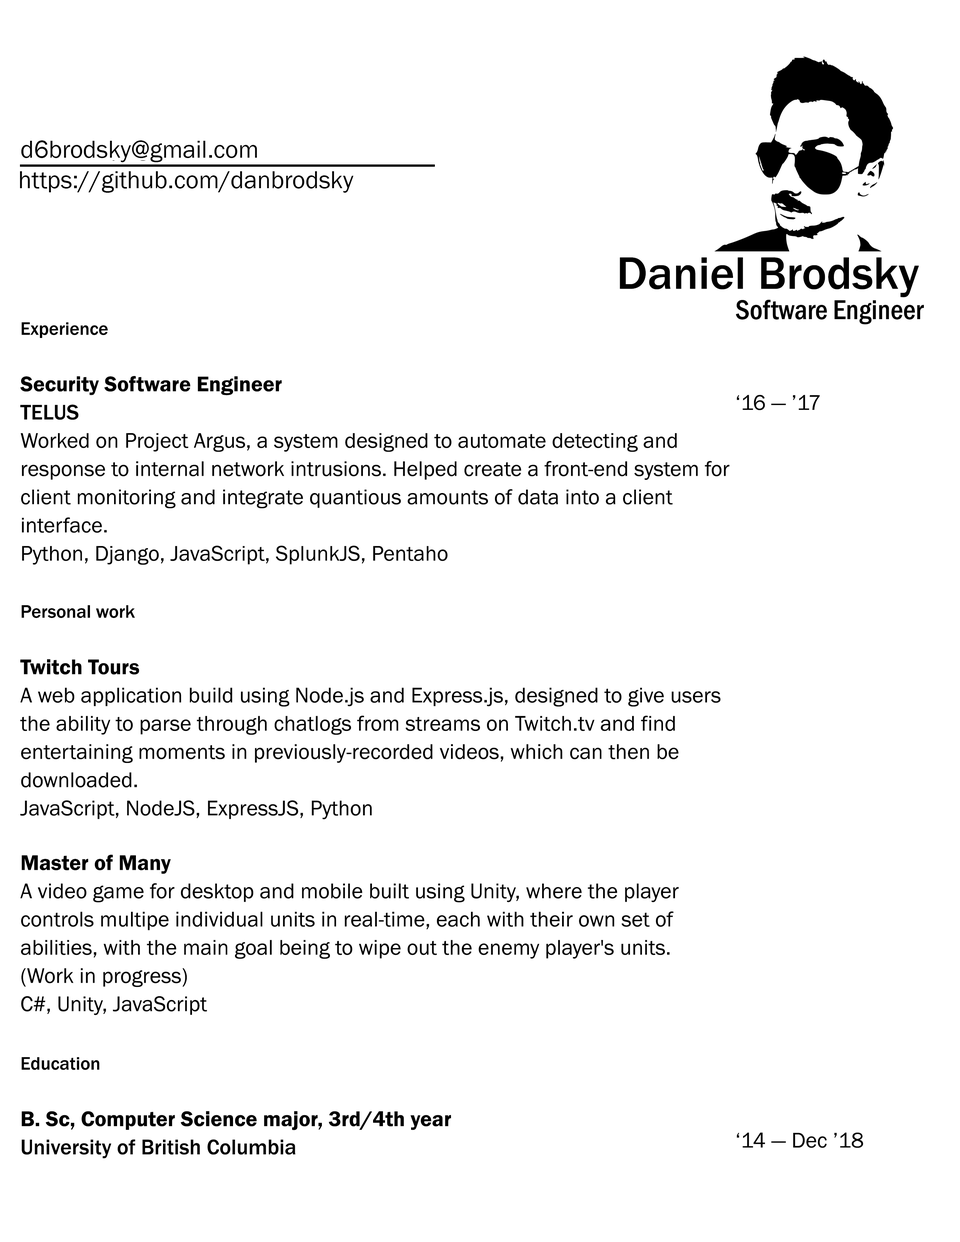
<style>
.page{position:relative;width:960px;height:1242px;background:#ffffff}
.page>*{position:absolute;margin:0}
.t1{font:25.1px "FranklinGothic-Book";color:#000000}
.t2{font:47.1px "FranklinGothic-Medium";color:#000000}
.t3{font:28.2px "FranklinGothic-MediumCond";color:#000000}
.t4{font:22px/28.2px "FranklinGothic-Book";color:#000000}
.t5{font:18.8px/28.2px "FranklinGothic-Medium";color:#000000}
.t6{font:22px/28.2px "FranklinGothic-Demi";color:#000000}
.t7{font:22px/28.2px "FranklinGothic-Medium";color:#000000}
.t8{font:22px "FranklinGothic-Book";color:#000000}
</style>
<div class="page">
<p class="t1" style="left:21px;top:140px;width:236px;height:22px">d6brodsky@gmail.com</p>
<p class="t1" style="left:20px;top:171px;width:333px;height:22px">https://github.com/danbrodsky</p>
<p class="t2" style="left:620px;top:257px;width:299px;height:40px">Daniel Brodsky</p>
<p class="t3" style="left:736px;top:300px;width:188px;height:24px">Software Engineer</p>
<p class="t4" style="left:20px;top:322px;width:710px;height:243px"><span class="t5">Experience<br><br></span><span class="t6">Security Software Engineer <br></span><span class="t7">TELUS <br></span>Worked on Project Argus, a system designed to automate detecting and <br>response to internal network intrusions. Helped create a front-end system for client monitoring and integrate quantious amounts of data into a client <br>interface. <br>Python, Django, JavaScript, SplunkJS, Pentaho</p>
<p class="t8" style="left:737px;top:395px;width:126px;height:753px"><span class="t3"><br></span>‘16 — ’17<br><br><br><br><br><br><br><br><br><br><br><br><br><br><br><br><br><br><br><br><br><br><br><br><br><br><br><br>‘14 — Dec ’18</p>
<p class="t4" style="left:20px;top:605px;width:700px;height:214px"><span class="t5">Personal work <br><br></span><span class="t6">Twitch Tours <br></span>A web application build using Node.js and Express.js, designed to give users the ability to parse through chatlogs from streams on Twitch.tv and find <br>entertaining moments in previously-recorded videos, which can then be downloaded. <br>JavaScript, NodeJS, ExpressJS, Python</p>
<p class="t4" style="left:20px;top:855px;width:659px;height:160px"><span class="t6">Master of Many <br></span>A video game for desktop and mobile built using Unity, where the player <br>controls multipe individual units in real-time, each with their own set of <br>abilities, with the main goal being to wipe out the enemy player's units. <br>(Work in progress) <br>C#, Unity, JavaScript</p>
<p class="t6" style="left:21px;top:1057px;width:430px;height:102px"><span class="t5">Education  <br><br></span>B. Sc, Computer Science major, 3rd/4th year <br><span class="t7">University of British Columbia</span></p>
</div>
